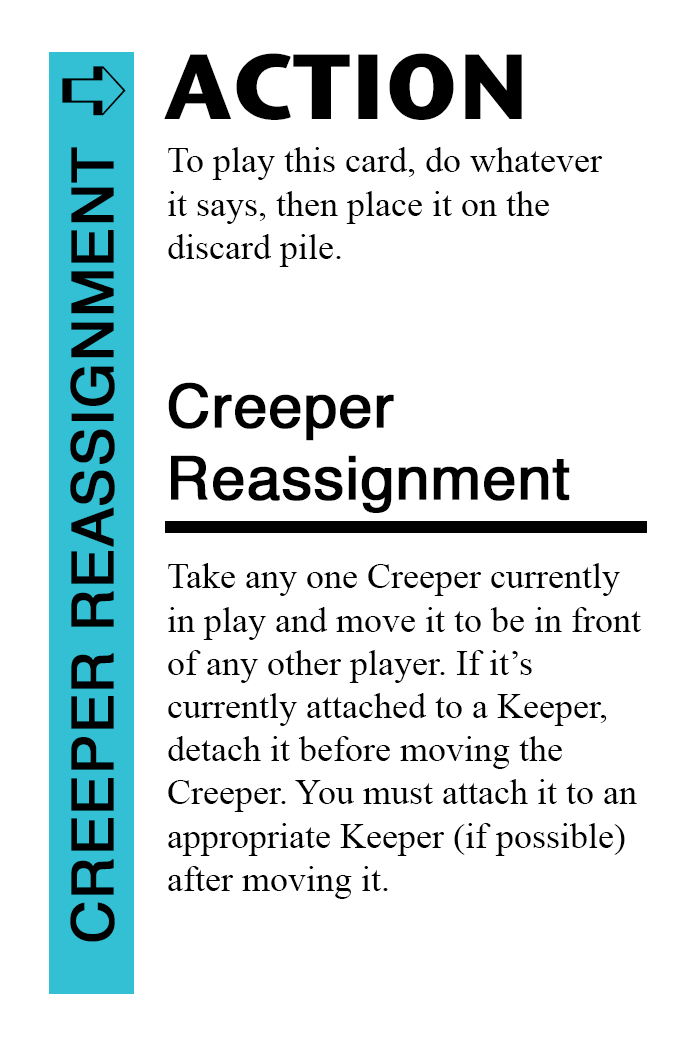
<style>
.page{position:relative;width:700px;height:1042px;background:#ffffff}
.page>*{position:absolute;margin:0}
.t1{font:92px "StoneSansITC-Bold";color:#000000}
.t2{font:82px "MS-Gothic";color:#000000}
.t3{font:58px "Helvetica";color:#000000;font-weight:bold}
.t4{font:36px "TimesNewRomanPSMT";color:#000000}
.t5{font:60px "Helvetica";color:#000000;font-weight:bold}
</style>
<div class="page">
<p class="t1" style="left:164px;top:53px;width:358px;height:67px">ACTION</p>
<p class="t2" style="left:62px;top:66px;width:64px;height:50px">➪</p>
<p class="t3" style="left:70px;top:147px;width:45px;height:795px;rotate:-90deg">CREEPER REASSIGNMENT</p>
<p class="t4" style="left:168px;top:147px;width:435px;height:120px">To play this card, do whatever<br>it says, then place it on the<br>discard pile.</p>
<p class="t5" style="left:168px;top:382px;width:402px;height:131px">Creeper<br>Reassignment</p>
<p class="t4" style="left:168px;top:563px;width:473px;height:336px">Take any one Creeper currently<br>in play and move it to be in front<br>of any other player. If it’s<br>currently attached to a Keeper,<br>detach it before moving the<br>Creeper. You must attach it to an<br>appropriate Keeper (if possible)<br>after moving it.</p>
</div>
